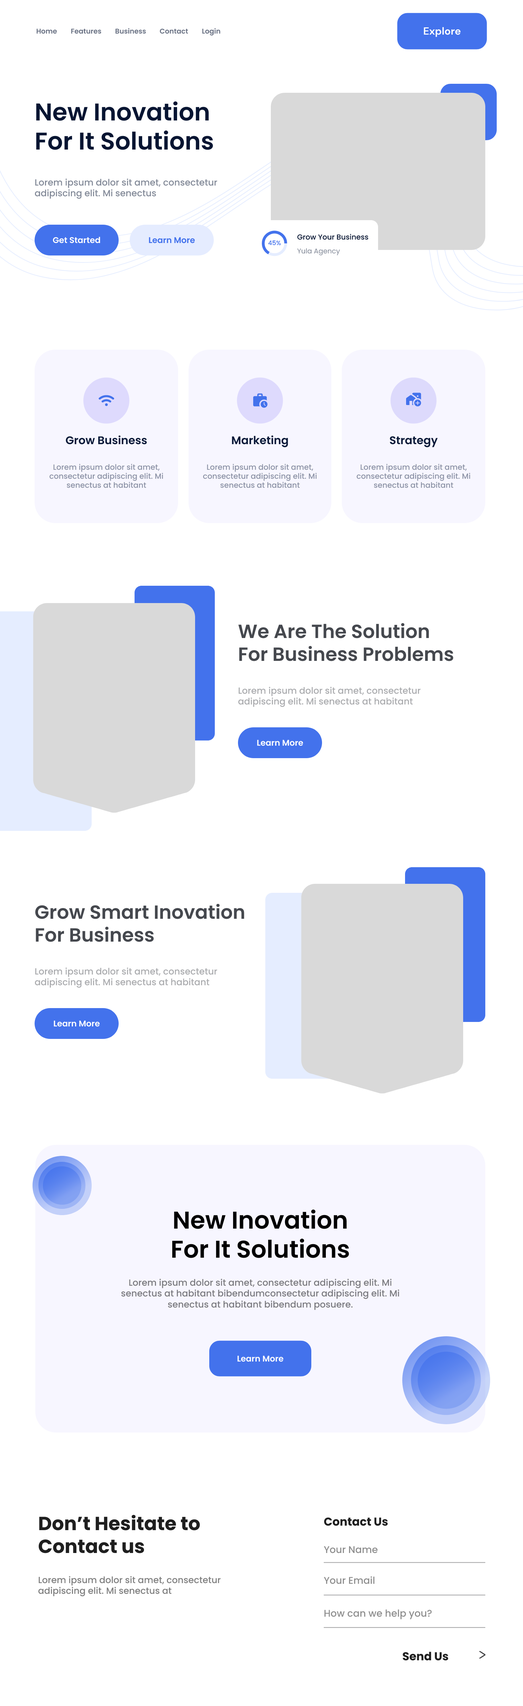
<style>
.page{position:relative;width:523px;height:1706px;background:#ffffff}
.page>*{position:absolute;margin:0}
.t1{font:6.9px "Poppins-SemiBold";color:#6a7284}
.t2{font:10.4px "DMSans-Bold";color:#ffffff}
.t3{font:24.2px "Poppins-SemiBold";color:#071532}
.t4{font:9px "Poppins-Medium";color:#838a98}
.t5{font:7.3px "Poppins-Medium";color:#071532}
.t6{font:8.3px "Poppins-SemiBold";color:#ffffff}
.t7{font:8.3px "Poppins-SemiBold";color:#4372ec}
.t8{font:6.2px "Poppins-Medium";color:#4372ec}
.t9{font:6.9px "Poppins-Regular";color:#838a98}
.t10{font:11.1px "Poppins-SemiBold";color:#091938}
.t11{font:7.6px "Poppins-Medium";color:#8c92a5}
.t12{font:19px "Poppins-SemiBold";color:#45484e}
.t13{font:9px "Poppins-Medium";color:#abacaf}
.t14{font:24.2px "Poppins-SemiBold";color:#000000}
.t15{font:9px "Poppins-Medium";color:#7b7b7f}
.t16{font:19px "Poppins-Bold";color:#1f1f1f}
.t17{font:11.4px "Poppins-Bold";color:#1f1f1f}
.t18{font:9.7px "Poppins-Medium";color:#8f8f8f}
.t19{font:9px "Poppins-Medium";color:#7f7f7f}
</style>
<div class="page">
<p class="t1" style="left:36px;top:29px;width:21px;height:5px">Home</p>
<p class="t1" style="left:71px;top:29px;width:30px;height:5px">Features</p>
<p class="t1" style="left:115px;top:28px;width:31px;height:6px">Business</p>
<p class="t1" style="left:160px;top:28px;width:28px;height:6px">Contact</p>
<p class="t1" style="left:202px;top:28px;width:18px;height:8px">Login</p>
<p class="t2" style="left:424px;top:27px;width:37px;height:10px">Explore</p>
<p class="t3" style="left:36px;top:101px;width:177px;height:49px">New Inovation <br>For It Solutions</p>
<p class="t4" style="left:35px;top:178px;width:182px;height:21px">Lorem ipsum dolor sit amet, consectetur adipiscing elit. Mi senectus</p>
<p class="t5" style="left:297px;top:234px;width:72px;height:6px">Grow Your Business</p>
<p class="t6" style="left:53px;top:237px;width:47px;height:6px">Get Started</p>
<p class="t7" style="left:149px;top:237px;width:46px;height:6px">Learn More</p>
<p class="t8" style="left:268px;top:240px;width:13px;height:5px">45%</p>
<p class="t9" style="left:297px;top:248px;width:43px;height:7px">Yula Agency</p>
<p class="t10" style="left:66px;top:435px;width:81px;height:9px">Grow Business</p>
<p class="t10" style="left:232px;top:435px;width:56px;height:12px">Marketing</p>
<p class="t10" style="left:390px;top:436px;width:48px;height:11px">Strategy</p>
<p class="t11" style="left:50px;top:464px;width:113px;height:24px;text-align:center">Lorem ipsum dolor sit amet, consectetur adipiscing elit. Mi senectus at habitant</p>
<p class="t11" style="left:203px;top:464px;width:114px;height:24px;text-align:center">Lorem ipsum dolor sit amet, consectetur adipiscing elit. Mi senectus at habitant</p>
<p class="t11" style="left:357px;top:464px;width:114px;height:24px;text-align:center">Lorem ipsum dolor sit amet, consectetur adipiscing elit. Mi senectus at habitant</p>
<p class="t12" style="left:238px;top:623px;width:216px;height:38px">We Are The Solution <br>For Business Problems</p>
<p class="t13" style="left:238px;top:686px;width:183px;height:21px">Lorem ipsum dolor sit amet, consectetur adipiscing elit. Mi senectus at habitant</p>
<p class="t6" style="left:257px;top:740px;width:47px;height:6px">Learn More</p>
<p class="t12" style="left:35px;top:903px;width:209px;height:39px">Grow Smart Inovation <br>For Business</p>
<p class="t13" style="left:35px;top:967px;width:182px;height:21px">Lorem ipsum dolor sit amet, consectetur adipiscing elit. Mi senectus at habitant</p>
<p class="t6" style="left:54px;top:1020px;width:46px;height:7px">Learn More</p>
<p class="t14" style="left:172px;top:1209px;width:177px;height:49px;text-align:center">New Inovation<br>For It Solutions</p>
<p class="t15" style="left:121px;top:1278px;width:278px;height:32px;text-align:center">Lorem ipsum dolor sit amet, consectetur adipiscing elit. Mi senectus at habitant bibendumconsectetur adipiscing elit. Mi senectus at habitant bibendum posuere.</p>
<p class="t6" style="left:237px;top:1356px;width:47px;height:6px">Learn More</p>
<p class="t16" style="left:38px;top:1514px;width:162px;height:39px">Don’t Hesitate to<br>Contact us</p>
<p class="t17" style="left:324px;top:1517px;width:64px;height:9px">Contact Us</p>
<p class="t18" style="left:324px;top:1546px;width:54px;height:7px">Your Name</p>
<p class="t19" style="left:38px;top:1576px;width:183px;height:20px">Lorem ipsum dolor sit amet, consectetur adipiscing elit. Mi senectus at</p>
<p class="t18" style="left:324px;top:1576px;width:51px;height:8px">Your Email</p>
<p class="t18" style="left:325px;top:1609px;width:107px;height:10px">How can we help you?</p>
<p class="t17" style="left:403px;top:1652px;width:46px;height:8px">Send Us</p>
</div>
